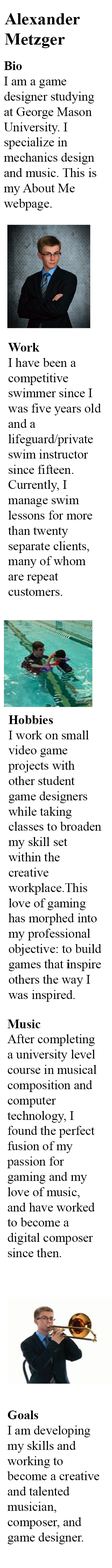
<style>
.page{position:relative;width:112px;height:1568px;background:#ffffff}
.page>*{position:absolute;margin:0}
.t1{font:17px "TimesNewRomanPS-BoldMT";color:#000000}
.t2{font:12.7px "TimesNewRomanPSMT";color:#000000}
.t3{font:12.7px "TimesNewRomanPS-BoldMT";color:#000000}
</style>
<div class="page">
<p class="t1" style="left:5px;top:13px;width:74px;height:35px">Alexander<br>Metzger</p>
<p class="t2" style="left:4px;top:61px;width:92px;height:149px"><span class="t3">Bio<br></span>I am a game designer studying at George Mason University. I specialize in mechanics design and music. This is my About Me webpage.</p>
<p class="t2" style="left:8px;top:343px;width:93px;height:253px"><span class="t3">Work<br></span>I have been a competitive swimmer since I was five years old and a lifeguard/private swim instructor since fifteen. Currently, I manage swim lessons for more than twenty separate clients, many of whom are repeat customers.</p>
<p class="t2" style="left:8px;top:715px;width:93px;height:287px"><span class="t3">Hobbies<br></span>I work on small video game projects with other student game designers while taking classes to broaden my skill set within the creative workplace.This love of gaming has morphed into my professional objective: to build games that <span class="t3">i</span>nspire others the way I was inspired.</p>
<p class="t2" style="left:7px;top:1020px;width:89px;height:237px"><span class="t3">Music<br></span>After completing a university level course in musical composition and computer technology, I found the perfect fusion of my passion for gaming and my love of music, and have worked to become a digital composer since then.</p>
<p class="t2" style="left:7px;top:1411px;width:92px;height:133px"><span class="t3">Goals<br></span>I am developing my skills and working to become a creative and talented musician, <br>composer, and game designer.</p>
</div>
